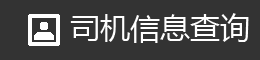
<style>
.page{position:relative;width:260px;height:60px;background:#333333}
.page>*{position:absolute;margin:0}
.t1{font:30px "MicrosoftYaHei";color:#ffffff}
</style>
<div class="page">
<p class="t1" style="left:70px;top:13px;width:179px;height:30px">司机信息查询</p>
</div>
